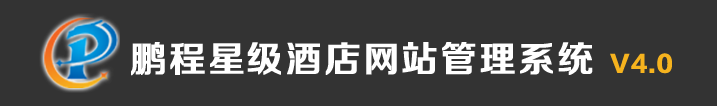
<style>
.page{position:relative;width:717px;height:106px;background:#333333}
.page>*{position:absolute;margin:0}
.t1{font:36px "FZZZHONGJW--GB1-0";letter-spacing:0.05em;color:#ffffff;font-weight:bold}
</style>
<div class="page">
<p class="t1" style="left:131px;top:42px;width:462px;height:34px">鹏程星级酒店网站管理系统</p>
</div>
